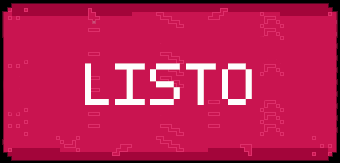
<style>
.page{position:relative;width:340px;height:163px;background:#c91450}
.page>*{position:absolute;margin:0}
.t1{font:95px "Essential";color:#fefefe}
</style>
<div class="page">
<p class="t1" style="left:85px;top:63px;width:167px;height:42px">LISTO</p>
</div>
